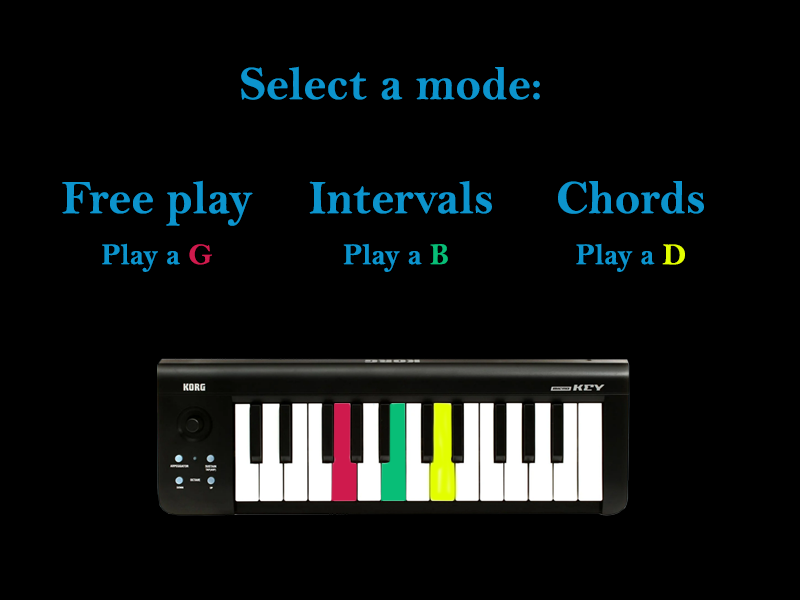
<style>
.page{position:relative;width:800px;height:600px;background:#000000}
.page>*{position:absolute;margin:0}
.t1{font:48px "BellMTBold";color:#0c94cd}
.t2{font:30px "BellMTBold";color:#0c94cd}
.t3{font:30px "BellMTBold";color:#cf1a4d}
.t4{font:30px "BellMTBold";color:#08be77}
.t5{font:30px "BellMTBold";color:#e3fe00}
</style>
<div class="page">
<p class="t1" style="left:241px;top:66px;width:299px;height:34px">Select a mode:</p>
<p class="t1" style="left:62px;top:180px;width:191px;height:46px">Free play</p>
<p class="t1" style="left:309px;top:180px;width:183px;height:34px">Intervals</p>
<p class="t1" style="left:558px;top:181px;width:146px;height:33px">Chords</p>
<p class="t2" style="left:102px;top:243px;width:110px;height:29px">Play a <span class="t3">G</span></p>
<p class="t2" style="left:343px;top:243px;width:105px;height:29px">Play a <span class="t4">B</span></p>
<p class="t2" style="left:576px;top:243px;width:109px;height:29px">Play a <span class="t5">D</span></p>
</div>
